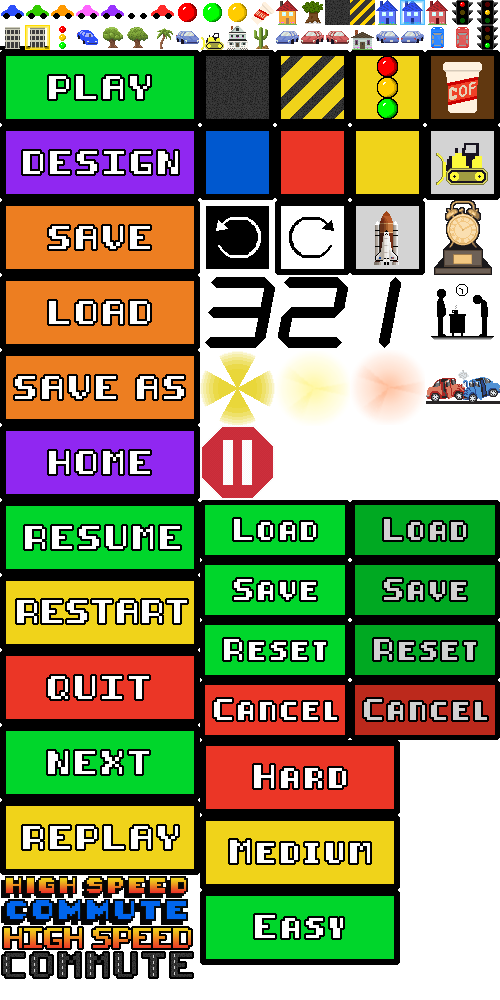
<style>
.page{position:relative;width:500px;height:1000px;background:#ffffff}
.page>*{position:absolute;margin:0}
.t1{font:20px "8-bit-pusab";letter-spacing:0.2em;color:#ffffff}
.t2{font:18px "8-bit-pusab";letter-spacing:0.2em;color:#ffffff}
.t3{font:18px "8-bit-pusab";letter-spacing:0.2em;color:#d1d1d1}
.t4{font:20px "8-bit-pusab";letter-spacing:0.1em;color:#ffffff}
.t5{font:20px "8-bit-pusab";letter-spacing:0.2em;color:#fefefe}
</style>
<div class="page">
<p class="t1" style="left:49px;top:76px;width:101px;height:23px">PLAY</p>
<p class="t1" style="left:23px;top:151px;width:155px;height:23px">DESIGN</p>
<p class="t1" style="left:49px;top:226px;width:101px;height:23px">SAVE</p>
<p class="t1" style="left:49px;top:301px;width:101px;height:23px">LOAD</p>
<p class="t1" style="left:15px;top:376px;width:169px;height:23px">SAVE AS</p>
<p class="t1" style="left:49px;top:451px;width:101px;height:23px">HOME</p>
<p class="t2" style="left:234px;top:519px;width:82px;height:21px">Load</p>
<p class="t3" style="left:384px;top:519px;width:82px;height:21px">Load</p>
<p class="t1" style="left:25px;top:526px;width:155px;height:23px">RESUME</p>
<p class="t2" style="left:234px;top:579px;width:82px;height:21px">Save</p>
<p class="t3" style="left:384px;top:579px;width:82px;height:21px">Save</p>
<p class="t4" style="left:17px;top:600px;width:170px;height:23px">RESTART</p>
<p class="t2" style="left:224px;top:639px;width:102px;height:21px">Reset</p>
<p class="t3" style="left:374px;top:639px;width:102px;height:21px">Reset</p>
<p class="t1" style="left:48px;top:676px;width:101px;height:23px">QUIT</p>
<p class="t2" style="left:214px;top:699px;width:123px;height:21px">Cancel</p>
<p class="t3" style="left:364px;top:699px;width:123px;height:21px">Cancel</p>
<p class="t1" style="left:48px;top:751px;width:101px;height:23px">NEXT</p>
<p class="t1" style="left:254px;top:765px;width:92px;height:23px">Hard</p>
<p class="t5" style="left:23px;top:826px;width:155px;height:23px">REPLAY</p>
<p class="t1" style="left:230px;top:840px;width:140px;height:23px">Medium</p>
<p class="t1" style="left:255px;top:915px;width:88px;height:23px">Easy</p>
</div>
